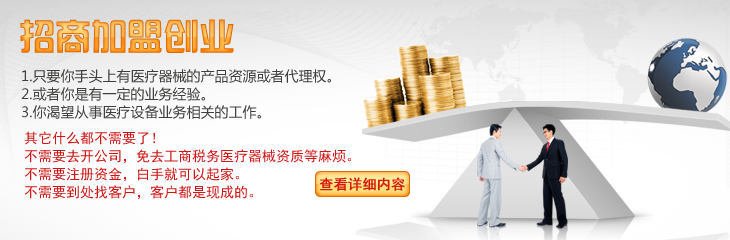
<style>
.page{position:relative;width:730px;height:240px}
.page>*{position:absolute;margin:0}
.t1{font:36px "hzgb"}
.t2{font:14px/18px "MicrosoftYaHei";color:#3f3f3d}
.t3{font:14px/18px "SimHei";color:#d01616}
.t4{font:14px "SimHei";color:#d5190b;font-weight:bold}
</style>
<div class="page">
<p class="t1" style="left:20px;top:19px;width:214px;height:34px">招商加盟创业</p>
<p class="t2" style="left:21px;top:69px;width:310px;height:50px">1.只要你手头上有医疗器械的产品资源或者代理权。<br>2.或者你是有一定的业务经验。<br>3.你渴望从事医疗设备业务相关的工作。</p>
<p class="t3" style="left:24px;top:131px;width:327px;height:68px">其它什么都不需要了！<br>不需要去开公司，免去工商税务医疗器械资质等麻烦。<br>不需要注册资金，白手就可以起家。<br>不需要到处找客户，客户都是现成的。</p>
<p class="t4" style="left:319px;top:177px;width:86px;height:14px">查看详细内容</p>
</div>
